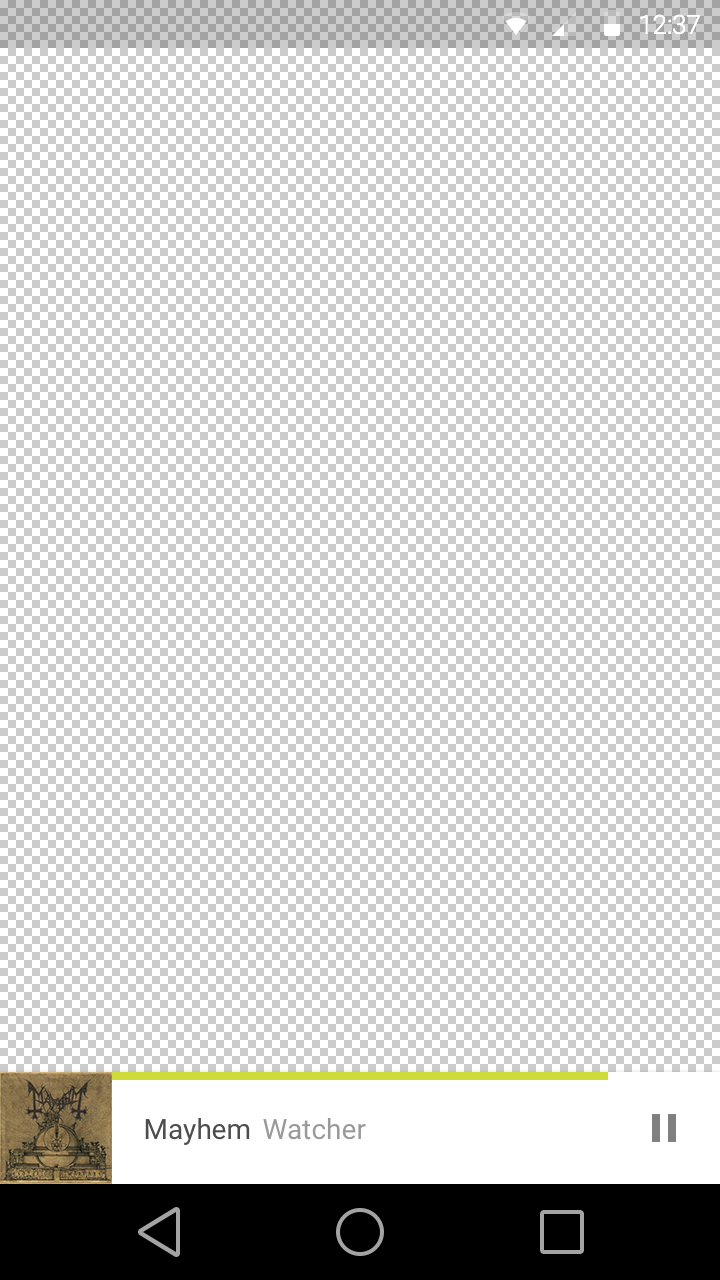
<style>
.page{position:relative;width:720px;height:1280px;background:#ffffff}
.page>*{position:absolute;margin:0}
.t1{font:26.1px "Roboto-Light";color:#ffffff}
.t2{font:28px "Roboto-Regular";color:#4d4d4d}
.t3{font:28px "Roboto-Regular";color:#999999}
</style>
<div class="page">
<p class="t1" style="left:640px;top:14px;width:60px;height:21px">12:37</p>
<p class="t2" style="left:145px;top:1118px;width:105px;height:27px">Mayhem</p>
<p class="t3" style="left:263px;top:1118px;width:103px;height:22px">Watcher</p>
</div>
